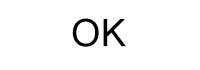
<style>
.page{position:relative;width:200px;height:70px;background:#ffffff}
.page>*{position:absolute;margin:0}
.t1{font:38px "ArialMT";color:#000000}
</style>
<div class="page">
<p class="t1" style="left:72px;top:18px;width:54px;height:29px">OK</p>
</div>
